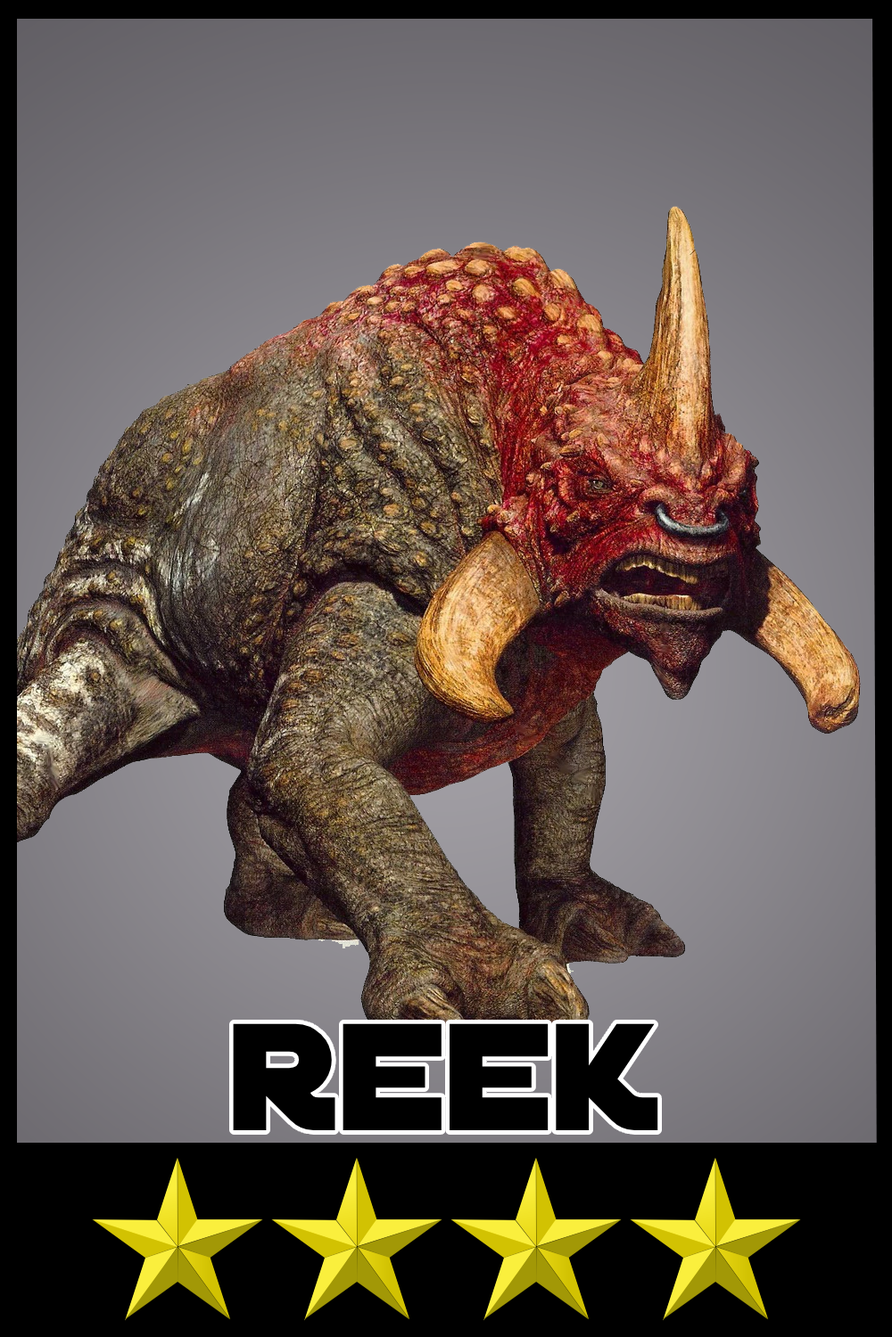
<style>
.page{position:relative;width:892px;height:1337px}
.page>*{position:absolute;margin:0}
.t1{font:163.7px "DistantGalaxy";color:#000000}
</style>
<div class="page">
<p class="t1" style="left:233px;top:1024px;width:425px;height:107px">reek</p>
</div>
